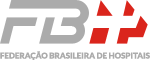
<style>
.page{position:relative;width:150px;height:60px;background:#ffffff}
.page>*{position:absolute;margin:0}
.t1{font:8px "Lato-Black";color:#ababab;text-transform:uppercase}
</style>
<div class="page">
<p class="t1" style="left:0px;top:51px;width:150px;height:9px">federação brasileira de hospitais</p>
</div>
